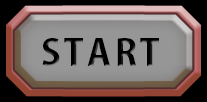
<style>
.page{position:relative;width:207px;height:102px;background:#000000}
.page>*{position:absolute;margin:0}
.t1{font:36px "KozGoPr6N-Bold";letter-spacing:0.1em;color:#000000}
</style>
<div class="page">
<p class="t1" style="left:42px;top:38px;width:117px;height:28px">START</p>
</div>
